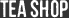
<style>
.page{position:relative;width:69px;height:18px;background:#333333}
.page>*{position:absolute;margin:0}
.t1{font:24px "MochaMattari";color:#ffffff}
</style>
<div class="page">
<p class="t1" style="left:0px;top:0px;width:68px;height:18px">Tea shop</p>
</div>
